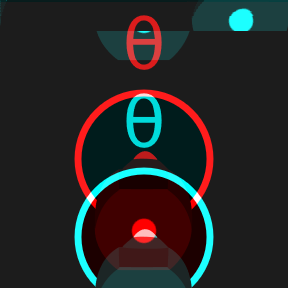
<style>
.page{position:relative;width:288px;height:288px;background:#1c1c1c}
.page>*{position:absolute;margin:0}
.t1{font:70px "DejaVuSans";letter-spacing:-0.04em}
</style>
<div class="page">
<p class="t1" style="left:126px;top:13px;width:36px;height:55px">θ</p>
</div>
